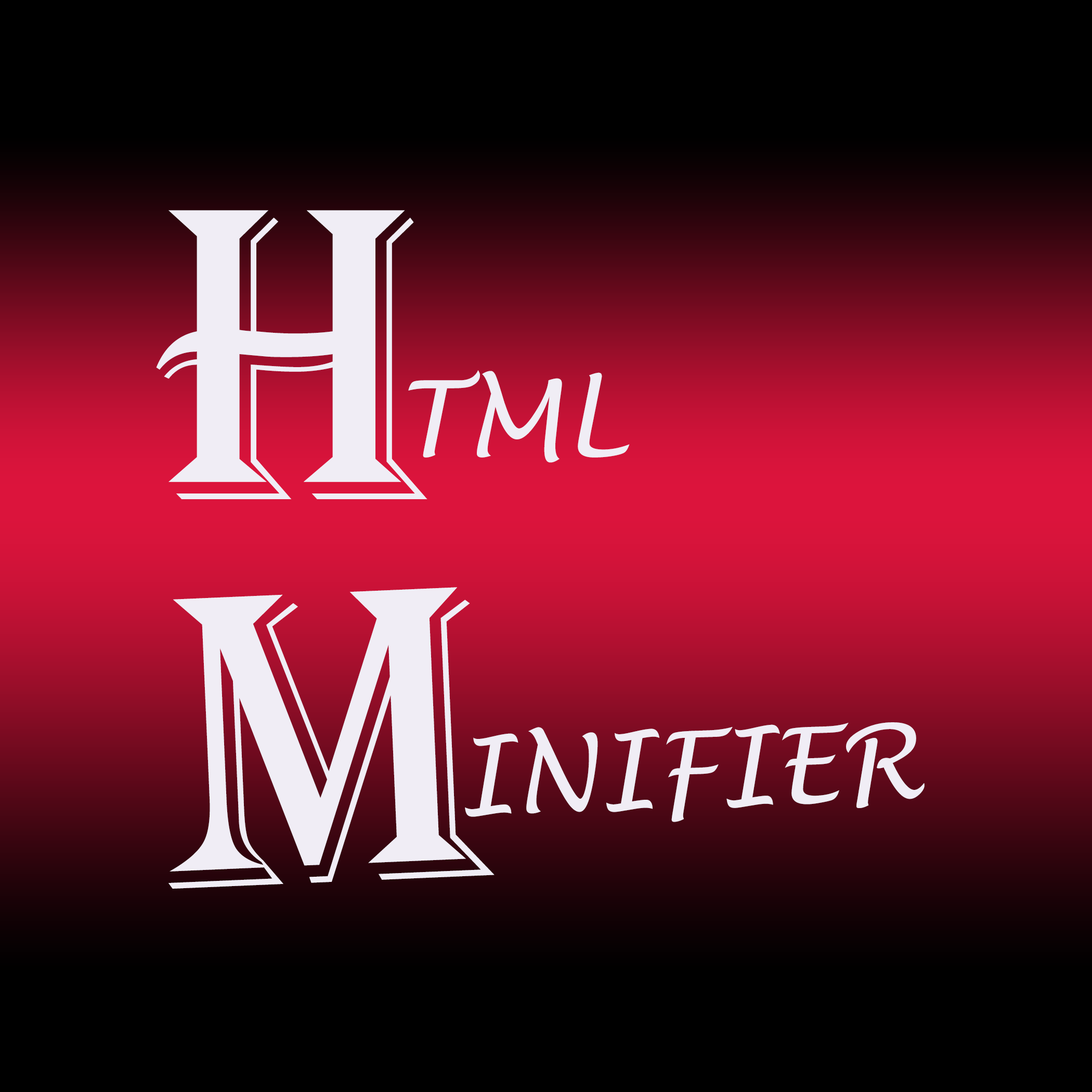
<style>
.page{position:relative;width:1092px;height:1092px;background:#000000}
.page>*{position:absolute;margin:0}
.t1{font:433.3px "Algerian";color:#f0edf5}
.t2{font:104px "LucidaHandwriting-Italic";color:#f0edf5}
</style>
<div class="page">
<p class="t1" style="left:156px;top:210px;width:271px;height:289px">H</p>
<p class="t2" style="left:408px;top:370px;width:222px;height:93px">TML</p>
<p class="t1" style="left:168px;top:587px;width:327px;height:302px;rotate:-2deg">m</p>
<p class="t2" style="left:465px;top:722px;width:460px;height:100px;rotate:-2deg">INIFIER</p>
</div>
